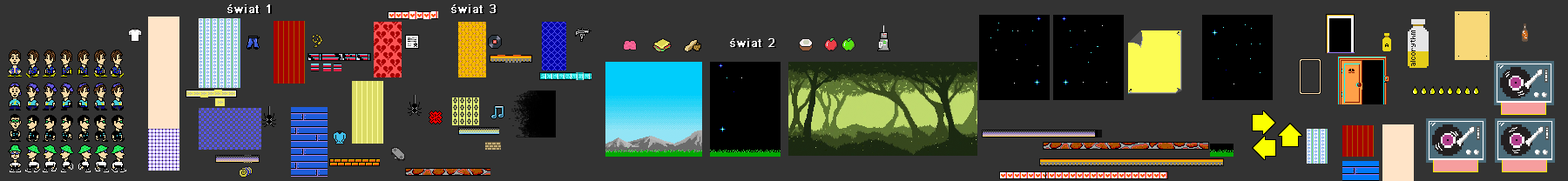
<style>
.page{position:relative;width:1568px;height:181px;background:#333333}
.page>*{position:absolute;margin:0}
.t1{font:10.9px "ArialMT";letter-spacing:0.07em;color:#ffffff;font-weight:bold}
</style>
<div class="page">
<p class="t1" style="left:227px;top:4px;width:43px;height:9px">świat 1</p>
<p class="t1" style="left:451px;top:4px;width:45px;height:9px">świat 3</p>
<p class="t1" style="left:730px;top:38px;width:44px;height:9px">świat 2</p>
</div>
